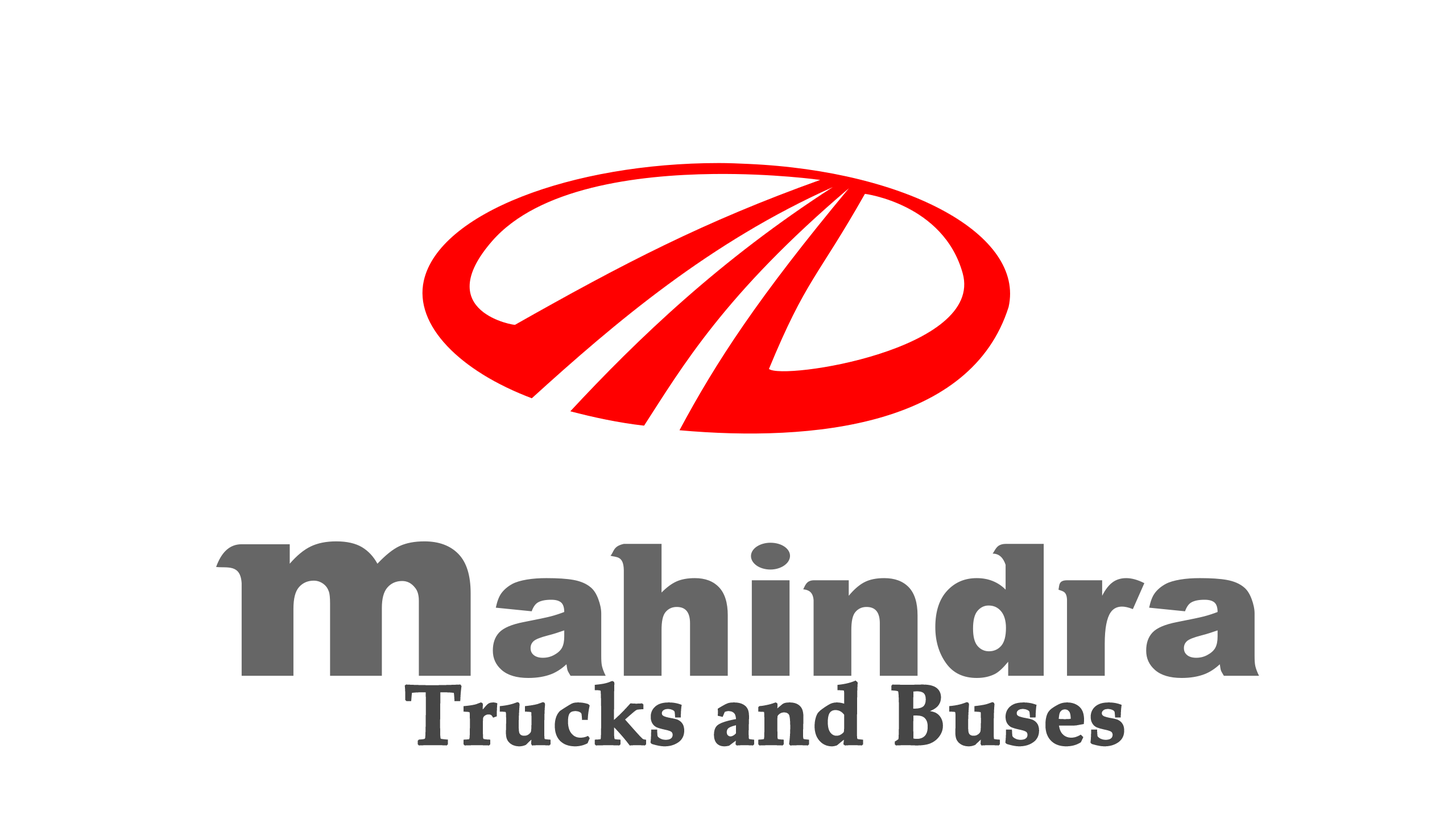
<style>
.page{position:relative;width:1456px;height:819px;background:#ffffff}
.page>*{position:absolute;margin:0}
.t1{font:85.3px "BookAntiqua-Bold";color:#464646;font-weight:bold}
.t2{font:40.9px "BellMT";color:#000000;font-weight:bold}
</style>
<div class="page">
<p class="t1" style="left:404px;top:680px;width:720px;height:67px"><span class="t2">                                                   </span>Trucks and Buses</p>
</div>
